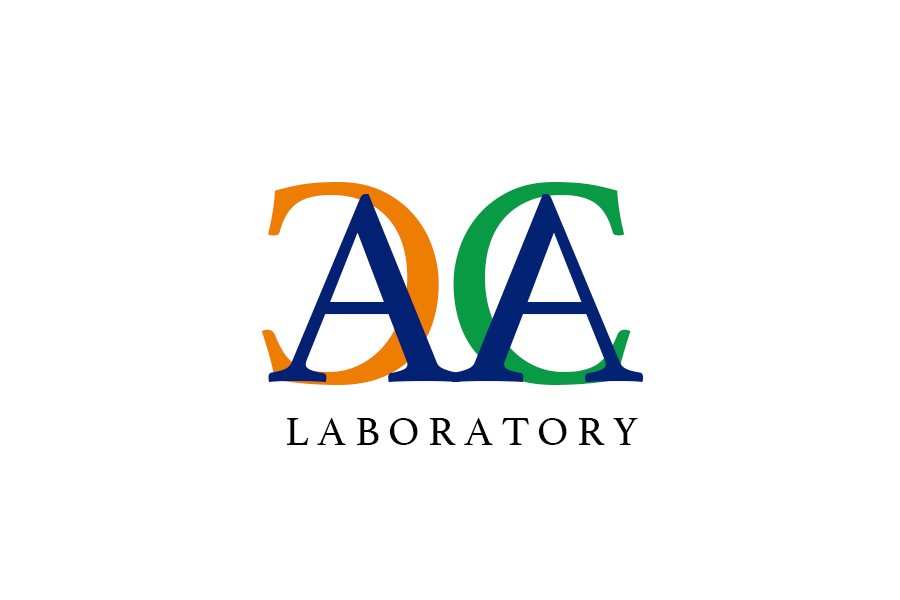
<style>
.page{position:relative;width:900px;height:600px;background:#ffffff}
.page>*{position:absolute;margin:0}
.t1{font:300px "Athelas-Regular";color:#ee7d04}
.t2{font:300px "Athelas-Regular";color:#000000}
.t3{font:300px "Athelas-Regular";color:#099a46}
.t4{font:283.3px "Athelas-Regular";color:#022172}
.t5{font:283.3px "Athelas-Regular";color:#022273}
.t6{font:41.7px "Athelas-Regular";color:#000000}
</style>
<div class="page">
<p class="t1" style="left:261px;top:182px;width:178px;height:203px;rotate:180deg"><span class="t2">    </span>C</p>
<p class="t3" style="left:453px;top:182px;width:178px;height:203px">C</p>
<p class="t4" style="left:268px;top:194px;width:192px;height:188px">A</p>
<p class="t5" style="left:451px;top:194px;width:193px;height:188px;rotate:180deg">A</p>
<p class="t6" style="left:286px;top:418px;width:352px;height:27px">L A B O R A T O R Y</p>
</div>
